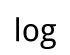
<style>
.page{position:relative;width:70px;height:55px;background:#ffffff}
.page>*{position:absolute;margin:0}
.t1{font:31.8px "DroidSans";color:#000000}
</style>
<div class="page">
<p class="t1" style="left:16px;top:17px;width:40px;height:32px">log</p>
</div>
